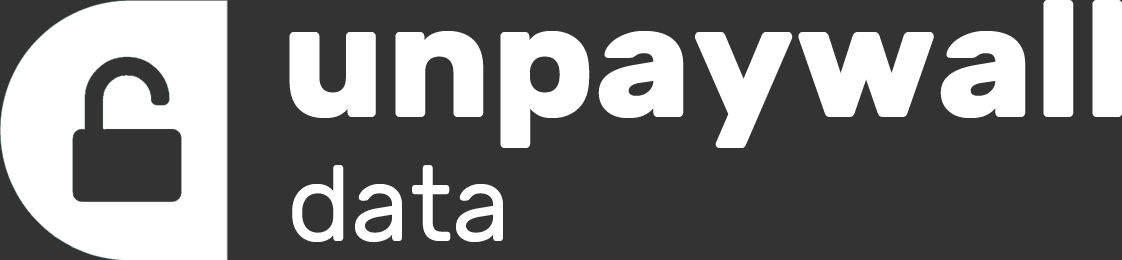
<style>
.page{position:relative;width:1122px;height:260px;background:#333333}
.page>*{position:absolute;margin:0}
.t1{font:164.3px "Rubik-Bold";color:#ffffff}
.t2{font:107.2px "Rubik-Regular";color:#ffffff}
</style>
<div class="page">
<p class="t1" style="left:289px;top:0px;width:833px;height:148px">unpaywall</p>
<p class="t2" style="left:292px;top:165px;width:211px;height:77px">data</p>
</div>
